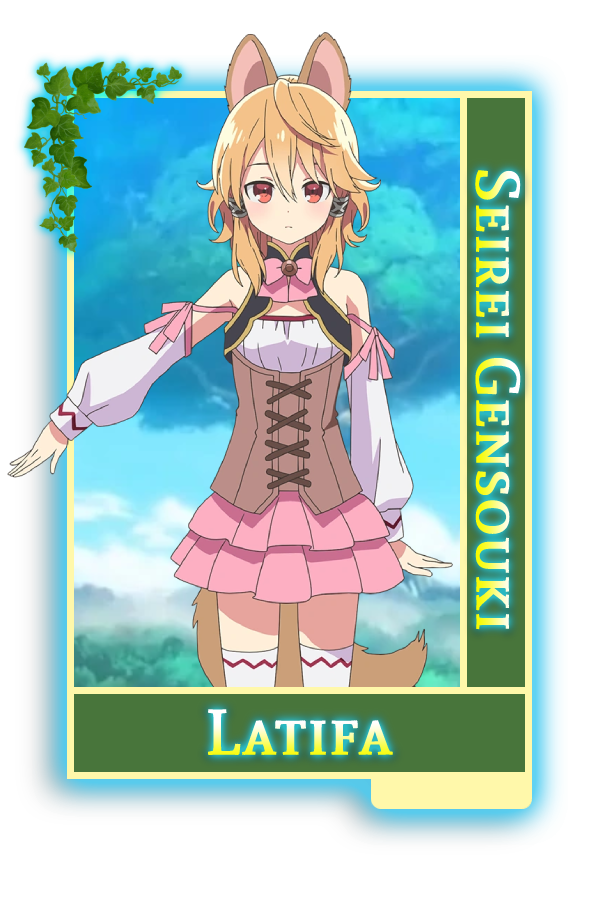
<style>
.page{position:relative;width:600px;height:900px}
.page>*{position:absolute;margin:0}
.t1{font:61px "AndadaSC-Regular";font-weight:bold}
.t2{font:64px "AndadaSC-Regular";font-weight:bold}
</style>
<div class="page">
<p class="t1" style="left:475px;top:170px;width:46px;height:460px;rotate:90deg">Seirei Gensouki</p>
<p class="t2" style="left:207px;top:709px;width:186px;height:47px">Latifa</p>
</div>
